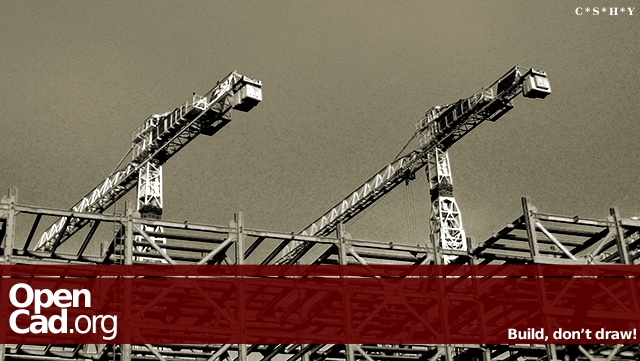
<style>
.page{position:relative;width:640px;height:361px}
.page>*{position:absolute;margin:0}
.t1{font:10px "BitstreamVeraSerif-Bold";letter-spacing:0.2em;color:#ffffff}
.t2{font:32px/26px "BitstreamVeraSans-Bold";letter-spacing:-0.1em;color:#ffffff}
.t3{font:32px/26px "BitstreamVeraSans-Roman";letter-spacing:-0.1em;color:#ffffff}
.t4{font:14px "BitstreamVeraSans-Bold";letter-spacing:-0.05em;color:#ffffff}
</style>
<div class="page">
<p class="t1" style="left:575px;top:7px;width:60px;height:8px">C*S*H*Y</p>
<p class="t2" style="left:9px;top:283px;width:108px;height:57px">Open<br>Cad<span class="t3">.org</span></p>
<p class="t4" style="left:508px;top:328px;width:128px;height:13px">Build, don’t draw!</p>
</div>
